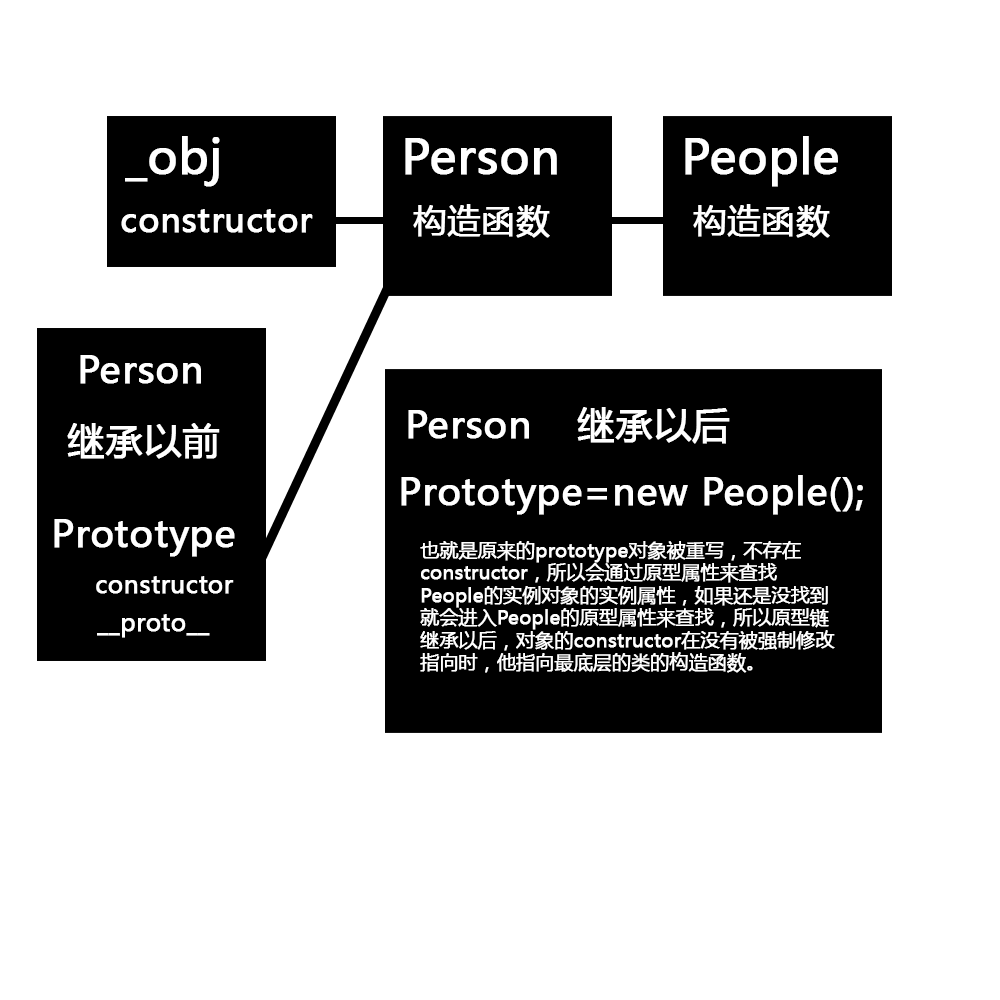
<style>
.page{position:relative;width:1000px;height:1000px;background:#ffffff}
.page>*{position:absolute;margin:0}
.t1{font:46.7px "MicrosoftYaHei";color:#ffffff;font-weight:bold}
.t2{font:33.3px "MicrosoftYaHei";color:#ffffff;font-weight:bold}
.t3{font:37.3px "MicrosoftYaHei";color:#ffffff;font-weight:bold}
.t4{font:18.7px "MicrosoftYaHei";color:#ffffff;font-weight:bold}
.t5{font:24px "MicrosoftYaHei";color:#ffffff;font-weight:bold}
</style>
<div class="page">
<p class="t1" style="left:125px;top:136px;width:95px;height:51px">_obj</p>
<p class="t1" style="left:685px;top:136px;width:153px;height:51px">People</p>
<p class="t1" style="left:405px;top:138px;width:152px;height:37px">Person</p>
<p class="t2" style="left:121px;top:209px;width:192px;height:24px">constructor</p>
<p class="t2" style="left:413px;top:204px;width:137px;height:34px">构造函数</p>
<p class="t2" style="left:693px;top:204px;width:137px;height:34px">构造函数</p>
<p class="t3" style="left:80px;top:355px;width:121px;height:29px">Person</p>
<p class="t3" style="left:408px;top:410px;width:121px;height:29px">Person</p>
<p class="t3" style="left:577px;top:407px;width:153px;height:37px">继承以后</p>
<p class="t3" style="left:67px;top:423px;width:153px;height:36px">继承以前</p>
<p class="t3" style="left:401px;top:475px;width:462px;height:40px">Prototype=new People();</p>
<p class="t3" style="left:54px;top:519px;width:181px;height:38px">Prototype</p>
<p class="t4" style="left:420px;top:541px;width:415px;height:132px">也就是原来的prototype对象被重写，不存在<br>constructor，所以会通过原型属性来查找<br>People的实例对象的实例属性，如果还是没找到<br>就会进入People的原型属性来查找，所以原型链<br>继承以后，对象的constructor在没有被强制修改<br>指向时，他指向最底层的类的构造函数。</p>
<p class="t5" style="left:96px;top:576px;width:138px;height:18px">constructor</p>
<p class="t5" style="left:97px;top:614px;width:113px;height:24px">__proto__</p>
</div>
